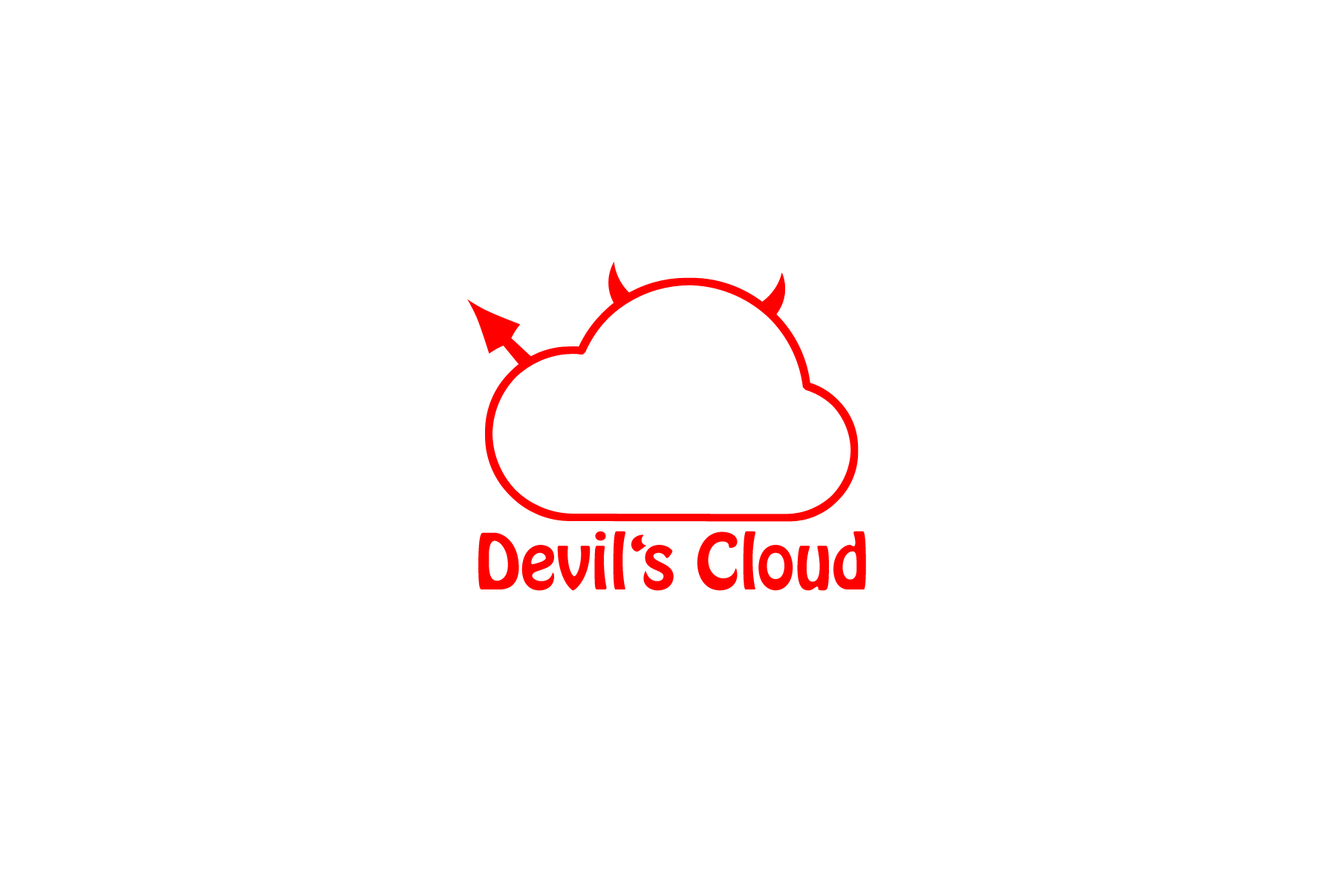
<style>
.page{position:relative;width:1337px;height:892px;background:#ffffff}
.page>*{position:absolute;margin:0}
.t1{font:68.1px "HoboStd";color:#ff0000}
.t2{font:68.1px "HoboStd";letter-spacing:0.2em;color:#ff0000}
.t3{font:61.9px "HoboStd";color:#ff0000}
</style>
<div class="page">
<p class="t1" style="left:478px;top:531px;width:388px;height:60px">Devi<span class="t2">l</span>s Cloud</p>
<p class="t3" style="left:631px;top:534px;width:15px;height:17px;rotate:-177deg">’</p>
</div>
